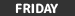
<style>
.page{position:relative;width:75px;height:16px;background:#333333}
.page>*{position:absolute;margin:0}
.t1{font:12.5px "RoundedMplus1c-ExtraBold";color:#ffffff}
</style>
<div class="page">
<p class="t1" style="left:15px;top:3px;width:43px;height:11px">FRIDAY</p>
</div>
